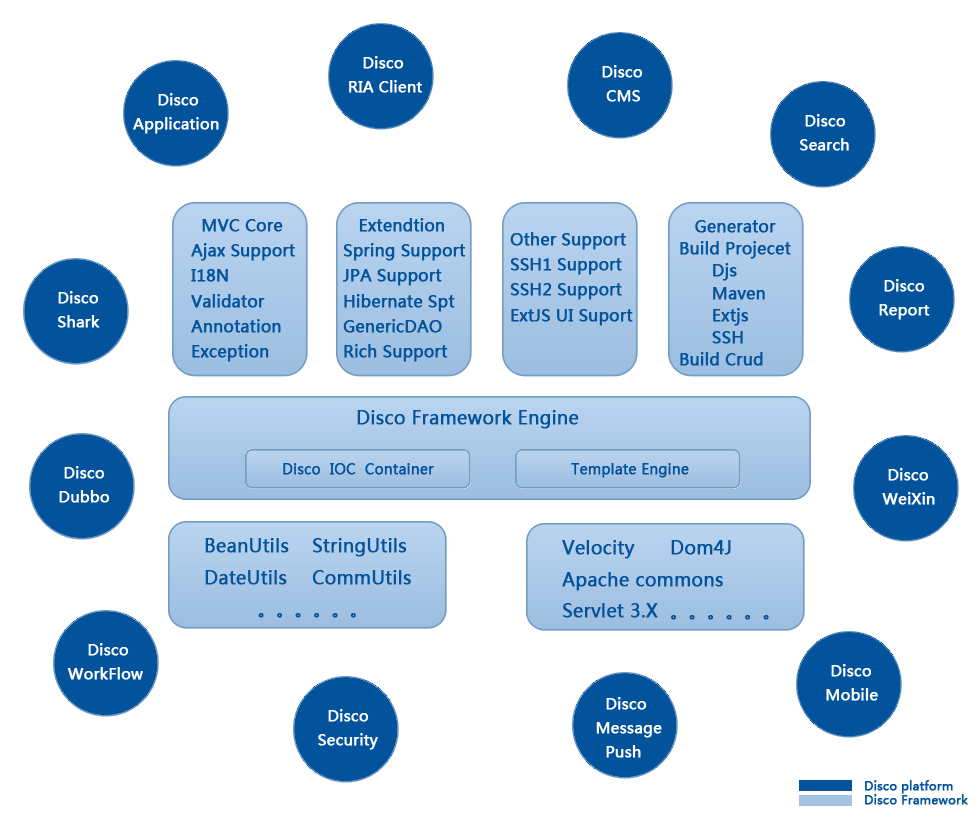
<style>
.page{position:relative;width:980px;height:822px;background:#ffffff}
.page>*{position:absolute;margin:0}
.t1{font:15px "MicrosoftYaHei";color:#ffffff;font-weight:bold}
.t2{font:16px "MicrosoftYaHei";color:#03539c;font-weight:bold}
.t3{font:18px "MicrosoftYaHei";color:#03539c;font-weight:bold}
.t4{font:14px "MicrosoftYaHei";color:#03539c;font-weight:bold}
.t5{font:12px "MicrosoftYaHei";color:#03539c;font-weight:bold}
</style>
<div class="page">
<p class="t1" style="left:349px;top:56px;width:73px;height:37px">Disco<br>  RIA Client</p>
<p class="t1" style="left:602px;top:65px;width:41px;height:37px">Disco<br>      CMS</p>
<p class="t1" style="left:133px;top:93px;width:86px;height:41px">Disco<br>Application</p>
<p class="t1" style="left:800px;top:114px;width:49px;height:37px">Disco<br>    Search</p>
<p class="t2" style="left:191px;top:219px;width:104px;height:143px">MVC Core<br>Ajax Support<br>I18N<br>Validator<br>Annotation<br>Exception</p>
<p class="t2" style="left:343px;top:218px;width:123px;height:144px">Extendtion<br>Spring Support<br>JPA Support<br>Hibernate Spt<br>GenericDAO<br>Rich Support</p>
<p class="t2" style="left:680px;top:220px;width:111px;height:146px">Generator<br>Build Projecet<br>　　Djs<br>　　Maven<br>　　Extjs<br>　　SSH<br>Build Crud</p>
<p class="t2" style="left:510px;top:232px;width:123px;height:94px">Other Support<br>SSH1 Support<br>SSH2 Support<br>ExtJS UI Suport</p>
<p class="t1" style="left:879px;top:279px;width:51px;height:41px">Disco<br>    Report</p>
<p class="t1" style="left:58px;top:291px;width:42px;height:37px">Disco<br>     Shark</p>
<p class="t3" style="left:357px;top:410px;width:222px;height:19px">Disco Framework Engine</p>
<p class="t1" style="left:59px;top:466px;width:51px;height:37px">Disco<br>    Dubbo</p>
<p class="t4" style="left:283px;top:463px;width:151px;height:12px">Disco  IOC  Container</p>
<p class="t4" style="left:571px;top:463px;width:118px;height:15px">Template Engine</p>
<p class="t1" style="left:882px;top:468px;width:53px;height:37px">Disco<br>    WeiXin</p>
<p class="t3" style="left:205px;top:538px;width:206px;height:80px">BeanUtils StringUtils<br>DateUtils CommUtils <br>    。。。。。。</p>
<p class="t3" style="left:562px;top:540px;width:207px;height:80px">Velocity Dom4J<br>Apache commons<br>Servlet 3.X  。。。。。。</p>
<p class="t1" style="left:67px;top:643px;width:76px;height:37px">Disco<br> WorkFlow</p>
<p class="t1" style="left:826px;top:664px;width:52px;height:37px">Disco<br>    Mobile</p>
<p class="t1" style="left:596px;top:697px;width:66px;height:61px">Disco<br>   Message<br>     Push</p>
<p class="t1" style="left:318px;top:709px;width:60px;height:41px">Disco<br>   Security</p>
<p class="t5" style="left:865px;top:780px;width:103px;height:25px">Disco platform<br>Disco Framework</p>
</div>
